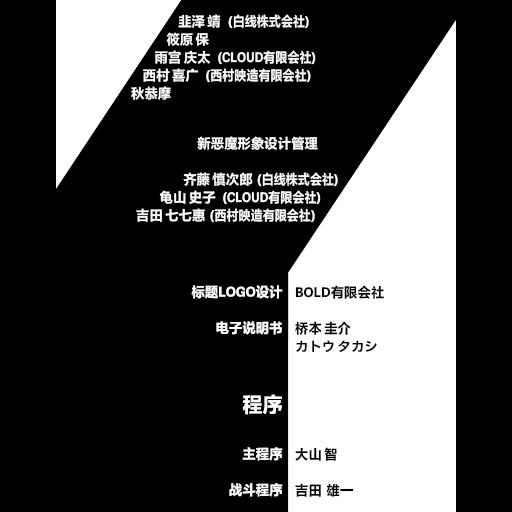
<style>
.page{position:relative;width:512px;height:512px;background:#000000}
.page>*{position:absolute;margin:0}
.t1{font:13.5px/18px "FZLTHProGlobal-Bold";letter-spacing:0.005em;color:#ffffff}
.t2{font:13.5px/18px "FZLTHProGlobal-Bold";letter-spacing:0.005em;color:#ffffff;scale:0.89 1}
.t3{font:13.5px "FZLTHProGlobal-Bold";letter-spacing:0.005em;color:#ffffff}
.t4{font:13.5px/18px "FZLTHProGlobal-Bold";letter-spacing:0.005em;color:#000000}
.t5{font:20.2px "FZLTHProGlobal-Bold";letter-spacing:0.005em;color:#ffffff}
</style>
<div class="page">
<p class="t1" style="left:131px;top:14px;width:185px;height:86px">韭泽 靖    <span class="t2">(白线株式会社)<br></span>               筱原 保<br>          雨宫 庆太   <span class="t2">(CLOUD有限会社)<br></span>     西村 喜广   <span class="t2">(西村映造有限会社)<br></span>秋恭摩</p>
<p class="t3" style="left:197px;top:136px;width:121px;height:14px">新恶魔形象设计管理</p>
<p class="t2" style="left:136px;top:172px;width:202px;height:51px"><span class="t1">                    齐藤 慎次郎  </span>(白线株式会社)<br><span class="t1">          龟山 史子   </span>(CLOUD有限会社)<br><span class="t1">吉田 七七惠  </span>(西村映造有限会社)</p>
<p class="t1" style="left:191px;top:285px;width:92px;height:212px;text-align:right">标题LOGO设计<br><br>电子说明书<br><br><br><br><br><br><br>主程序<br><br>战斗程序</p>
<p class="t4" style="left:295px;top:285px;width:89px;height:212px">BOLD有限会社<br><br>桥本 圭介<br>カトウ タカシ<br><br><br><br><br><br>大山 智<br><br>吉田  雄一</p>
<p class="t5" style="left:242px;top:394px;width:40px;height:21px">程序</p>
</div>
